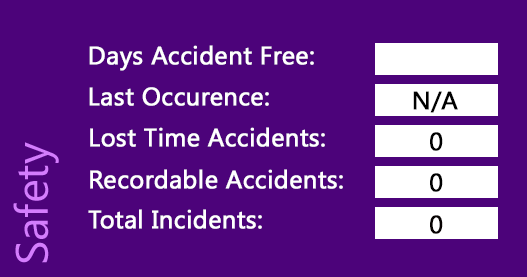
<style>
.page{position:relative;width:527px;height:277px;background:#4c037a}
.page>*{position:absolute;margin:0}
.t1{font:25px "Gadugi";color:#ffffff;font-weight:bold}
.t2{font:25px "Gadugi";color:#000000;font-weight:bold}
.t3{font:25px "Gadugi";color:#070202;font-weight:bold}
</style>
<div class="page">
<p class="t1" style="left:89px;top:45px;width:225px;height:26px">Days Accident Free:</p>
<p class="t1" style="left:89px;top:87px;width:180px;height:19px">Last Occurence:</p>
<p class="t2" style="left:413px;top:91px;width:45px;height:22px">N/A</p>
<p class="t1" style="left:90px;top:127px;width:235px;height:20px">Lost Time Accidents:</p>
<p class="t2" style="left:430px;top:132px;width:13px;height:19px">0</p>
<p class="t1" style="left:90px;top:169px;width:253px;height:20px">Recordable Accidents:</p>
<p class="t2" style="left:430px;top:173px;width:13px;height:19px">0</p>
<p class="t1" style="left:88px;top:209px;width:174px;height:20px">Total Incidents:</p>
<p class="t3" style="left:430px;top:215px;width:13px;height:19px">0</p>
</div>
